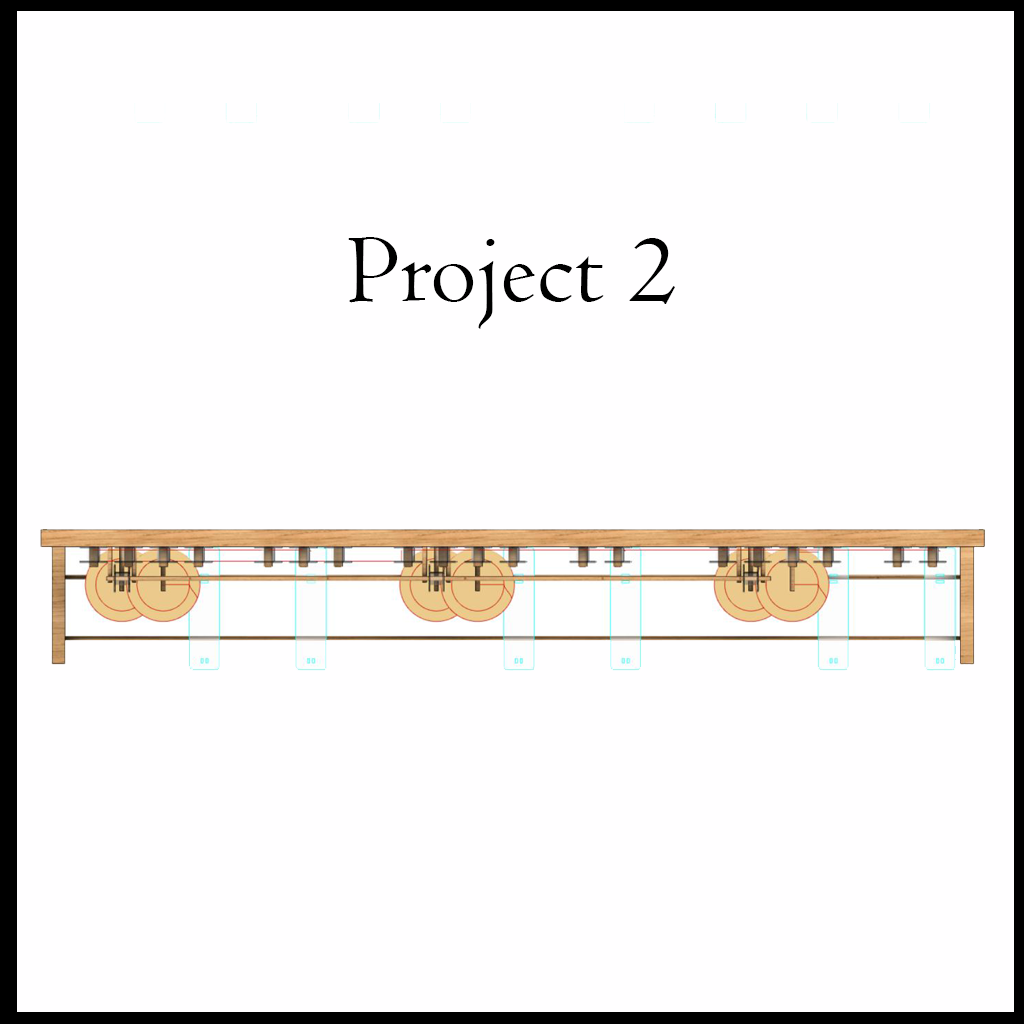
<style>
.page{position:relative;width:1024px;height:1024px;background:#fffeff}
.page>*{position:absolute;margin:0}
.t1{font:100px "Centaur";color:#000000}
</style>
<div class="page">
<p class="t1" style="left:348px;top:237px;width:327px;height:92px">Project 2</p>
</div>
